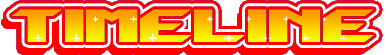
<style>
.page{position:relative;width:386px;height:55px;background:#ff0000}
.page>*{position:absolute;margin:0}
.t1{font:40px "NiseGenesis"}
</style>
<div class="page">
<p class="t1" style="left:11px;top:9px;width:364px;height:33px">Timeline</p>
<p class="t1" style="left:11px;top:9px;width:364px;height:33px">Timeline</p>
</div>
